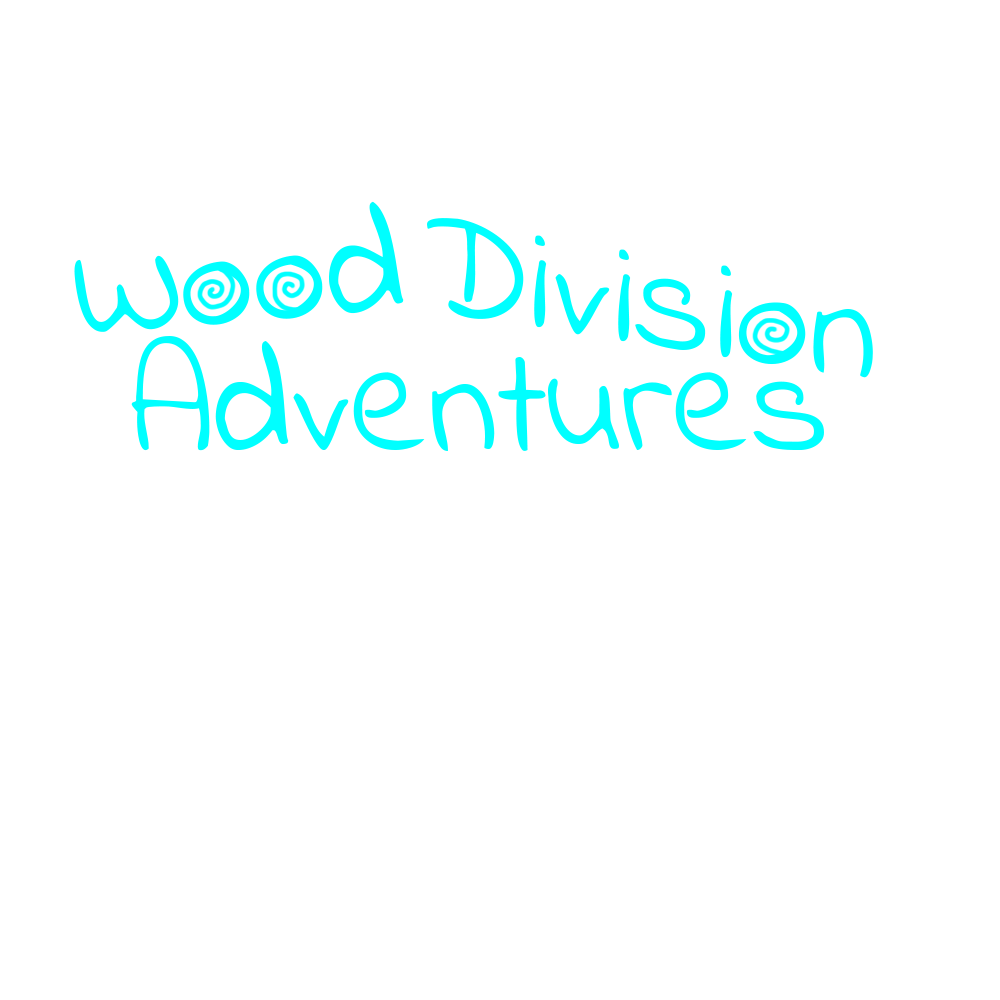
<style>
.page{position:relative;width:1000px;height:1000px;background:#ffffff}
.page>*{position:absolute;margin:0}
.t1{font:150px "IndieFlower";color:#00ffff}
</style>
<div class="page">
<p class="t1" style="left:74px;top:201px;width:330px;height:131px;rotate:-5deg">Wood</p>
<p class="t1" style="left:427px;top:218px;width:446px;height:160px;rotate:9deg">Division</p>
<p class="t1" style="left:131px;top:336px;width:693px;height:115px">Adventures</p>
</div>
